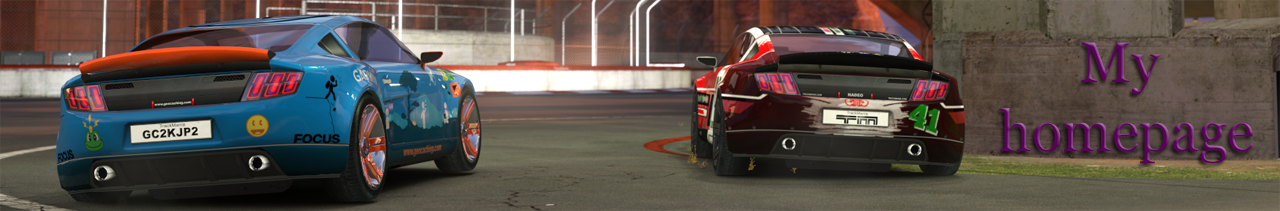
<style>
.page{position:relative;width:1280px;height:211px}
.page>*{position:absolute;margin:0}
.t1{font:57.1px "Vani";color:#5a015a}
</style>
<div class="page">
<p class="t1" style="left:999px;top:42px;width:255px;height:122px;text-align:center">My <br>homepage</p>
</div>
